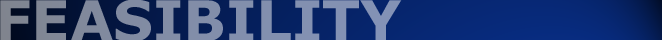
<style>
.page{position:relative;width:662px;height:40px}
.page>*{position:absolute;margin:0}
.t1{font:56px "Verdana-Bold";letter-spacing:-0.005em;color:#828da8}
</style>
<div class="page">
<p class="t1" style="left:0px;top:0px;width:402px;height:42px">FEASIBILITY</p>
</div>
